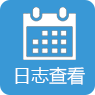
<style>
.page{position:relative;width:95px;height:95px;background:#3998d6}
.page>*{position:absolute;margin:0}
.t1{font:18px "MicrosoftYaHei";color:#ffffff}
</style>
<div class="page">
<p class="t1" style="left:15px;top:67px;width:70px;height:18px">日志查看</p>
</div>
